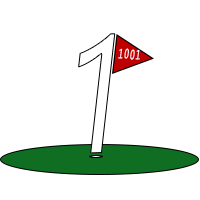
<style>
.page{position:relative;width:200px;height:200px;background:#ffffff}
.page>*{position:absolute;margin:0}
.t1{font:14.8px "CourierNewPSMT";font-weight:bold;font-style:italic;scale:0.61 1}
</style>
<div class="page">
<p class="t1" style="left:118px;top:48px;width:22px;height:12px;rotate:2deg">1001</p>
</div>
